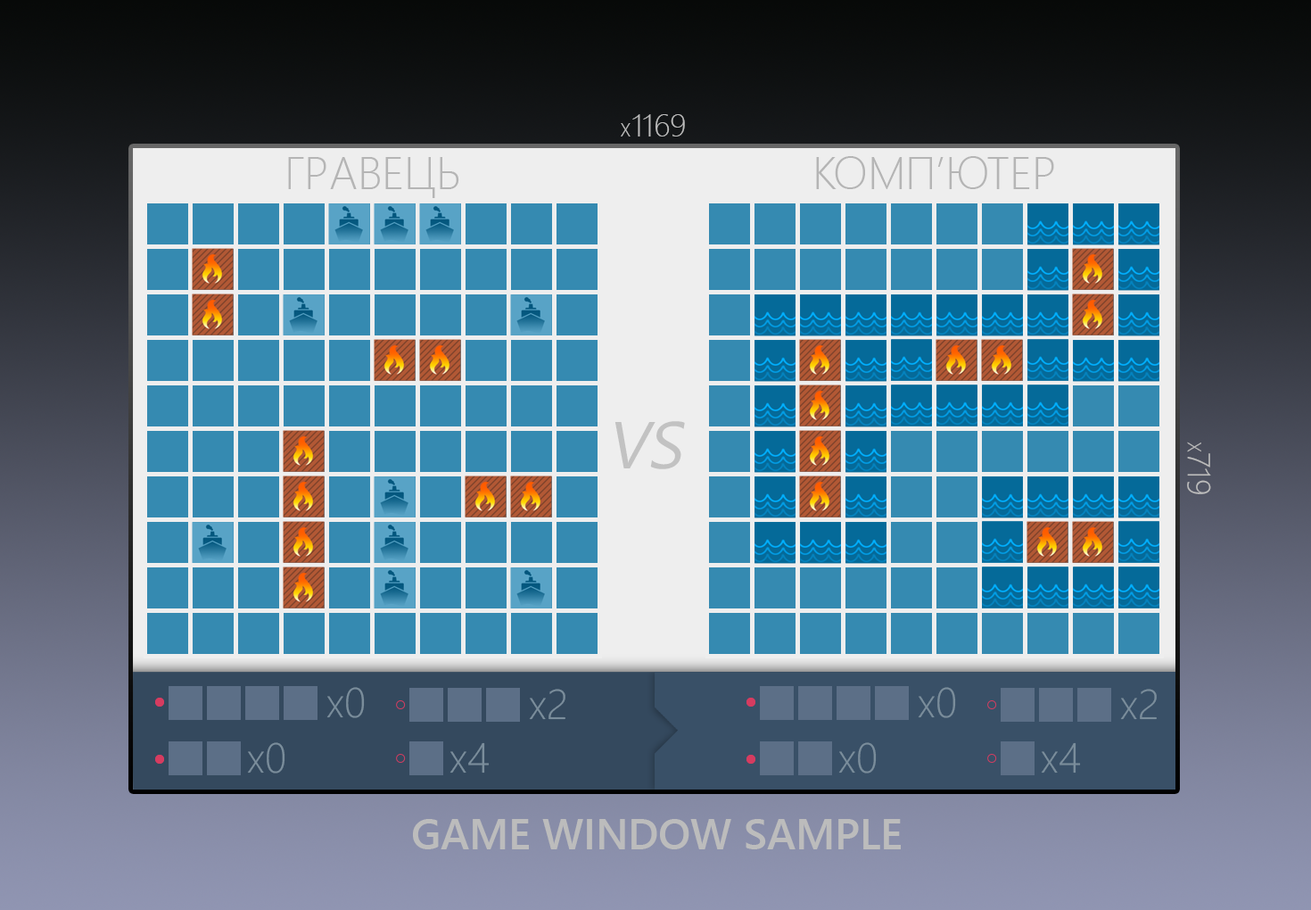
<style>
.page{position:relative;width:1311px;height:910px}
.page>*{position:absolute;margin:0}
.t1{font:31.8px "SegoeUI-Light";color:#bcbcbc;text-transform:uppercase}
.t2{font:19.2px "SegoeUI-Light";color:#bcbcbc;text-transform:uppercase}
.t3{font:45.2px "SegoeUI-Light";color:#c2c2c2;text-transform:uppercase}
.t4{font:66.3px "SegoeUI";color:#c2c2c2;text-transform:uppercase;font-style:italic}
.t5{font:41.9px "SegoeUI-Light";color:#7a8d9b}
.t6{font:41.9px "SegoeUI-Light";color:#7a8d9b;text-transform:uppercase}
.t7{font:42.5px "SegoeUI-Semibold";color:#bcbcbc;text-transform:uppercase}
</style>
<div class="page">
<p class="t1" style="left:621px;top:114px;width:64px;height:22px"><span class="t2">x</span>1169</p>
<p class="t3" style="left:288px;top:157px;width:171px;height:41px">гравець</p>
<p class="t3" style="left:816px;top:156px;width:238px;height:33px">Комп’ютер</p>
<p class="t4" style="left:614px;top:421px;width:71px;height:48px">VS</p>
<p class="t1" style="left:1187px;top:441px;width:24px;height:53px;rotate:90deg"><span class="t2">x</span>719</p>
<p class="t5" style="left:326px;top:687px;width:39px;height:31px">x<span class="t6">0</span></p>
<p class="t5" style="left:529px;top:688px;width:36px;height:32px">x<span class="t6">2</span></p>
<p class="t5" style="left:918px;top:687px;width:38px;height:31px">x<span class="t6">0</span></p>
<p class="t5" style="left:1120px;top:688px;width:37px;height:32px">x<span class="t6">2</span></p>
<p class="t5" style="left:247px;top:742px;width:38px;height:31px">x<span class="t6">0</span></p>
<p class="t5" style="left:449px;top:742px;width:41px;height:31px">x<span class="t6">4</span></p>
<p class="t5" style="left:838px;top:742px;width:39px;height:31px">x<span class="t6">0</span></p>
<p class="t5" style="left:1041px;top:742px;width:40px;height:31px">x<span class="t6">4</span></p>
<p class="t7" style="left:413px;top:819px;width:488px;height:30px">Game window sample</p>
</div>
